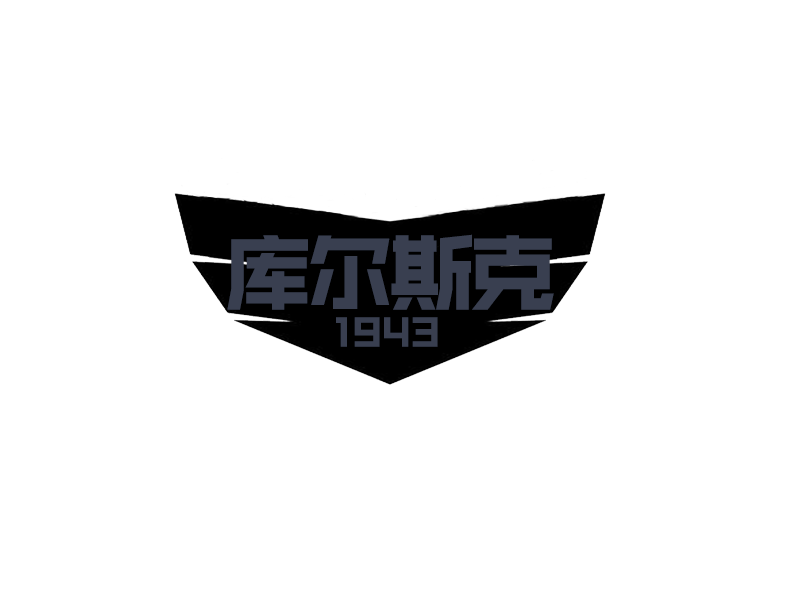
<style>
.page{position:relative;width:800px;height:600px;background:#ffffff}
.page>*{position:absolute;margin:0}
.t1{font:87.5px "BigruixianBlackGBV1.0";letter-spacing:-0.075em;color:#393f50}
.t2{font:41.7px "BigruixianBlackGBV1.0";letter-spacing:-0.075em;color:#393f50}
</style>
<div class="page">
<p class="t1" style="left:227px;top:234px;width:327px;height:76px">库尔斯克</p>
<p class="t2" style="left:336px;top:317px;width:102px;height:30px">1943</p>
</div>
